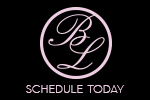
<style>
.page{position:relative;width:150px;height:100px;background:#000000}
.page>*{position:absolute;margin:0}
.t1{font:12px "ADELE-Light";color:#edcde1;text-transform:uppercase}
</style>
<div class="page">
<p class="t1" style="left:26px;top:85px;width:98px;height:8px">schedule  today</p>
</div>
